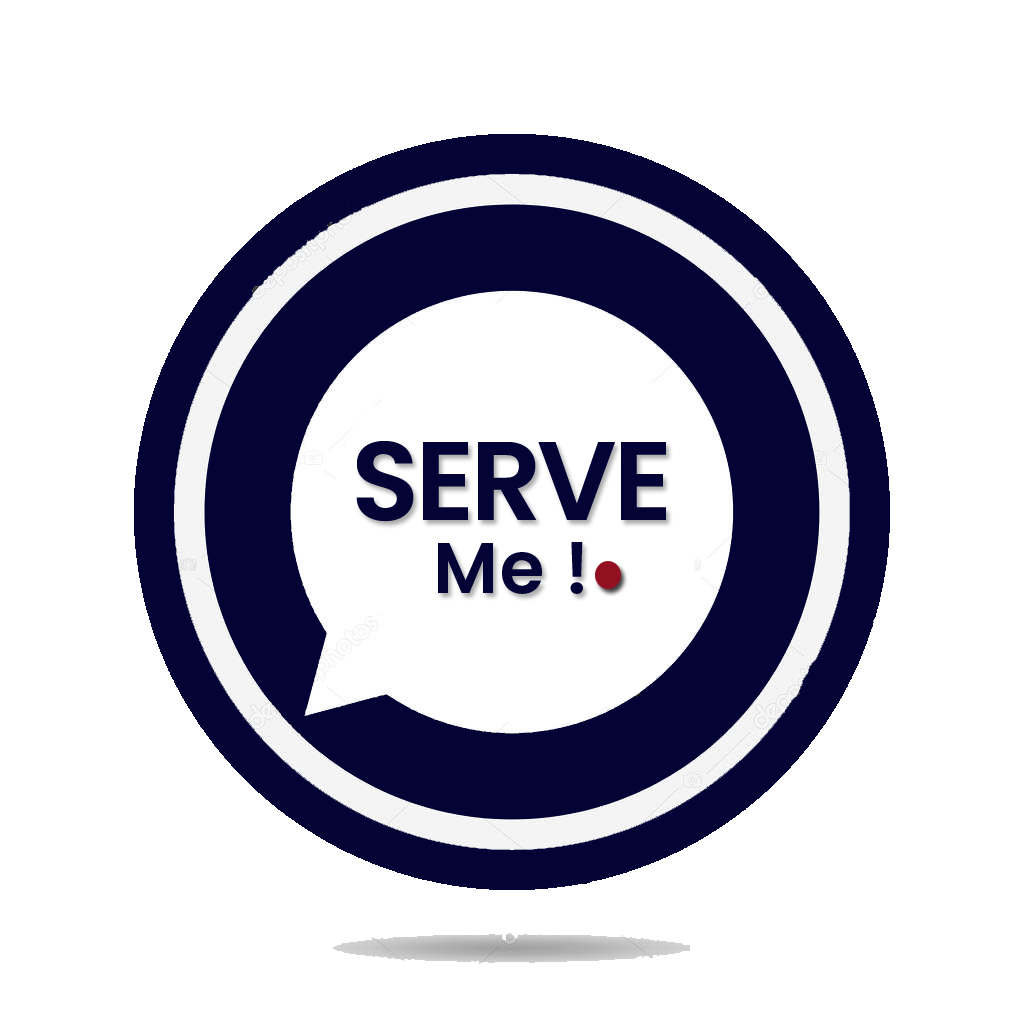
<style>
.page{position:relative;width:1024px;height:1024px;background:#ffffff}
.page>*{position:absolute;margin:0}
.t1{font:112.1px/73.7px "Poppins-SemiBold";letter-spacing:-0.04em;color:#030336}
.t2{font:72.1px/73.7px "Poppins-SemiBold";letter-spacing:0.02em;color:#030336}
</style>
<div class="page">
<p class="t1" style="left:356px;top:441px;width:310px;height:153px;text-align:center">SERVE<br><span class="t2">Me !</span></p>
</div>
